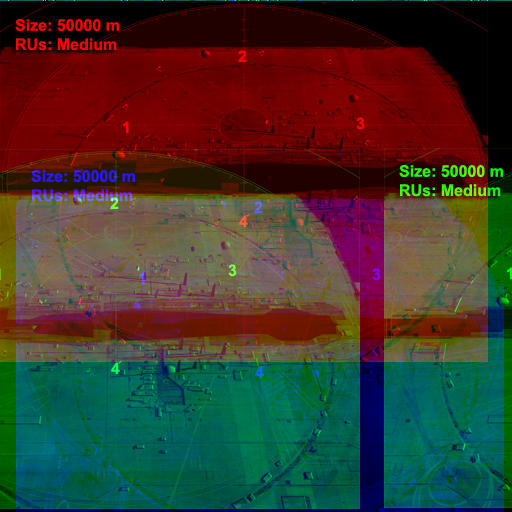
<style>
.page{position:relative;width:512px;height:512px}
.page>*{position:absolute;margin:0}
.t1{font:16px "Arial-BoldMT"}
.t2{font:16px "Arial-BoldMT";color:#ff0000}
</style>
<div class="page">
<p class="t1" style="left:15px;top:17px;width:104px;height:32px">Size: 50000 m<br>RUs: Medium</p>
<p class="t2" style="left:123px;top:119px;width:6px;height:12px">1</p>
<p class="t1" style="left:239px;top:213px;width:9px;height:12px">4</p>
</div>
